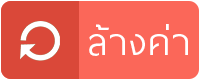
<style>
.page{position:relative;width:200px;height:80px;background:#fb6759}
.page>*{position:absolute;margin:0}
.t1{font:48px "ThaiSansLite";letter-spacing:0.03em;color:#ffffff}
</style>
<div class="page">
<p class="t1" style="left:89px;top:24px;width:99px;height:32px">ล้างค่า</p>
</div>
